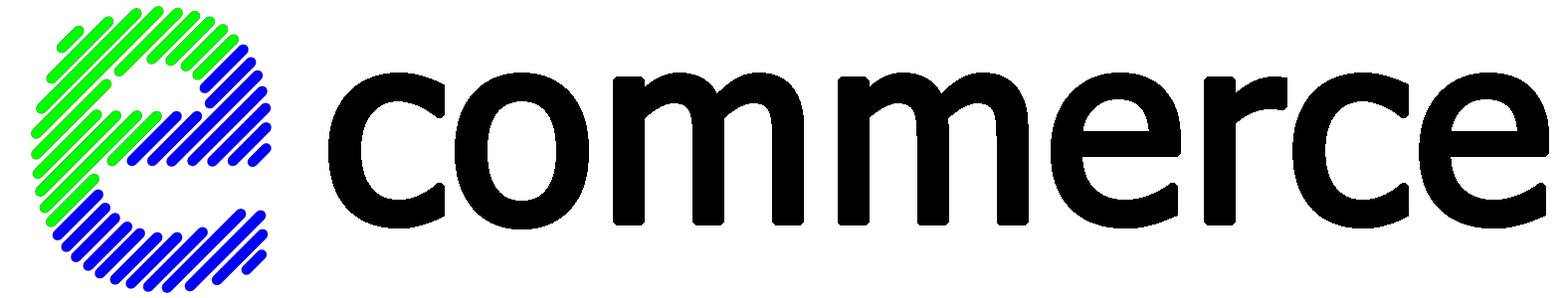
<style>
.page{position:relative;width:1568px;height:298px;background:#ffffff}
.page>*{position:absolute;margin:0}
.t1{font:258.7px "Tahoma";color:#000000;font-weight:bold}
</style>
<div class="page">
<p class="t1" style="left:328px;top:73px;width:1221px;height:157px">commerce</p>
</div>
